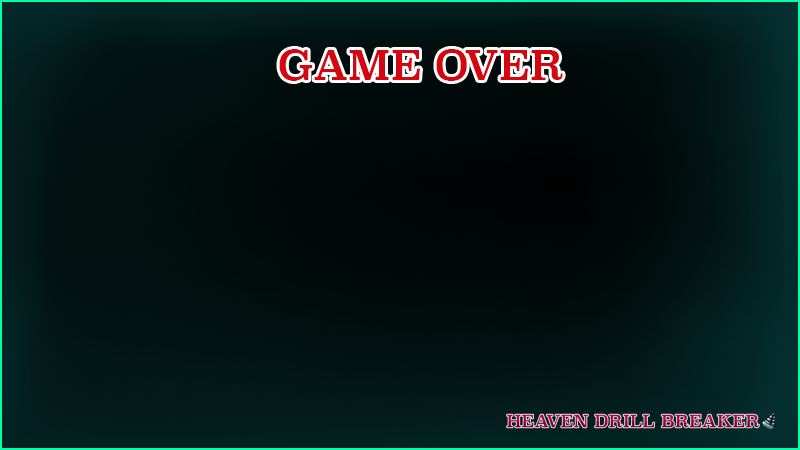
<style>
.page{position:relative;width:800px;height:450px}
.page>*{position:absolute;margin:0}
.t1{font:40.1px "Superclarendon-Regular";color:#d40711}
</style>
<div class="page">
<p class="t1" style="left:279px;top:49px;width:284px;height:32px">GAME OVER</p>
</div>
